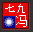
<style>
.page{position:relative;width:33px;height:32px;background:#f20000}
.page>*{position:absolute;margin:0}
.t1{font:10.4px "SimSun";color:#ffffff}
.t2{font:11.7px "SimSun";color:#ffffff}
</style>
<div class="page">
<p class="t1" style="left:5px;top:4px;width:20px;height:9px">七九</p>
<p class="t2" style="left:16px;top:15px;width:11px;height:12px">冯</p>
</div>
